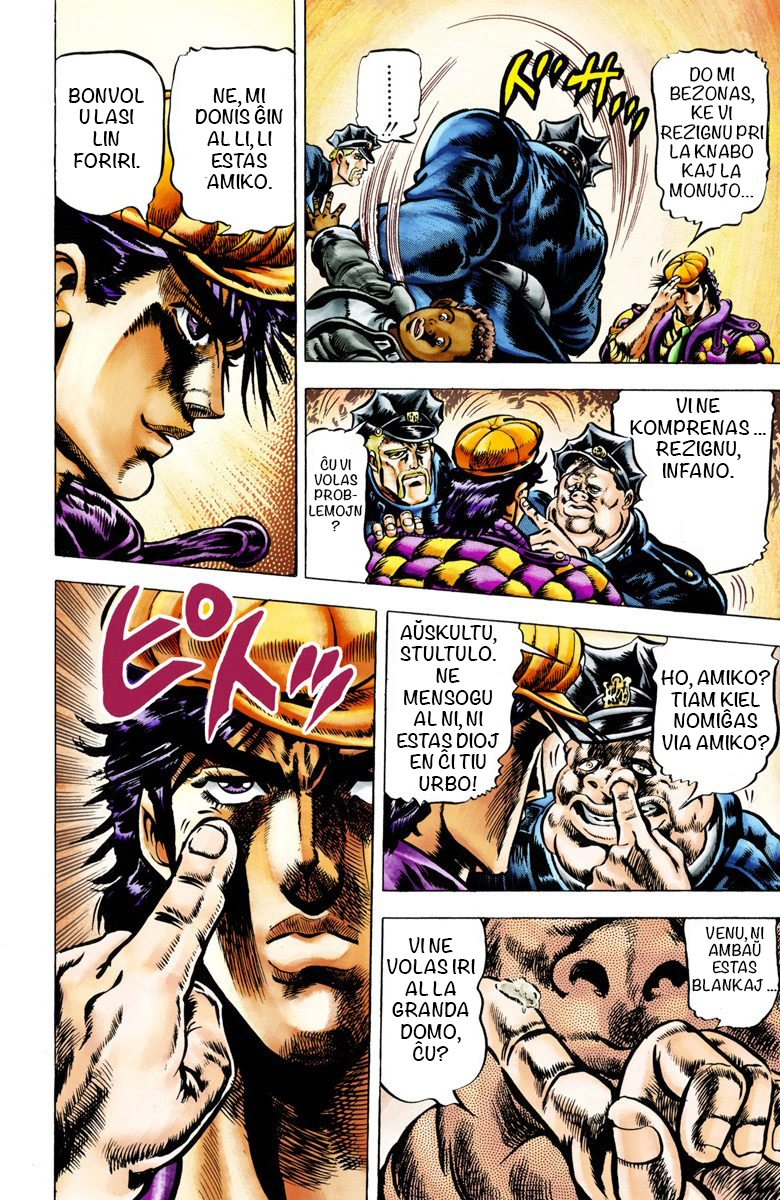
<style>
.page{position:relative;width:780px;height:1200px}
.page>*{position:absolute;margin:0}
.t1{font:16.1px "Noteworthy-Bold";color:#000000}
.t2{font:18px "Noteworthy-Bold";color:#000000}
.t3{font:12.6px "Noteworthy-Bold";color:#000000}
.t4{font:14.4px "Noteworthy-Bold";color:#000000}
</style>
<div class="page">
<p class="t1" style="left:660px;top:66px;width:104px;height:132px;text-align:center">DO MI BEZONAS, KE VI REZIGNU PRI LA KNABO KAJ LA MONUJO…</p>
<p class="t2" style="left:68px;top:87px;width:76px;height:81px;text-align:center">BONVOLU LASI LIN FORIRI.</p>
<p class="t2" style="left:195px;top:88px;width:88px;height:101px;text-align:center">NE, MI DONIS ĜIN AL LI, LI ESTAS AMIKO.</p>
<p class="t2" style="left:630px;top:397px;width:136px;height:81px;text-align:center">VI NE KOMPRENAS ... REZIGNU, INFANO.</p>
<p class="t3" style="left:309px;top:455px;width:54px;height:77px;text-align:center">ĈU VI VOLAS PROB-<br>LEMOJN?</p>
<p class="t2" style="left:397px;top:620px;width:102px;height:171px;text-align:center">AŬSKULTU, STULTULO. NE MENSOGU AL NI, NI ESTAS DIOJ EN ĈI TIU URBO!</p>
<p class="t2" style="left:661px;top:670px;width:110px;height:80px;text-align:center">HO, AMIKO? TIAM KIEL NOMIĜAS VIA AMIKO?</p>
<p class="t4" style="left:692px;top:926px;width:85px;height:66px;text-align:center">VENU, NI AMBAŬ ESTAS BLANKAJ ...</p>
<p class="t2" style="left:386px;top:937px;width:89px;height:124px;text-align:center">VI NE VOLAS IRI AL LA GRANDA DOMO, ĈU?</p>
</div>
